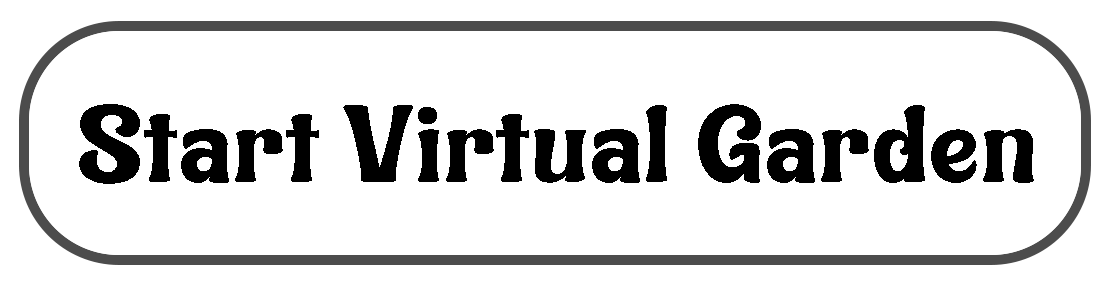
<style>
.page{position:relative;width:1113px;height:288px;background:#ffffff}
.page>*{position:absolute;margin:0}
.t1{font:104.2px "Rodixutrial-Regular";color:#000000}
</style>
<div class="page">
<p class="t1" style="left:79px;top:104px;width:955px;height:80px">Start Virtual Garden</p>
</div>
